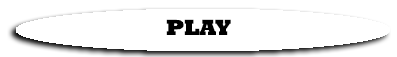
<style>
.page{position:relative;width:397px;height:57px;background:#ffffff}
.page>*{position:absolute;margin:0}
.t1{font:22px "Rockwell-ExtraBold";color:#000000}
</style>
<div class="page">
<p class="t1" style="left:166px;top:19px;width:65px;height:16px">PLAY</p>
</div>
